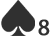
<style>
.page{position:relative;width:52px;height:36px;background:#ffffff}
.page>*{position:absolute;margin:0}
.t1{font:23.4px "MyriadPro-Regular";letter-spacing:-0.1em;color:#303030;font-weight:bold}
</style>
<div class="page">
<p class="t1" style="left:38px;top:19px;width:12px;height:17px">8</p>
</div>
